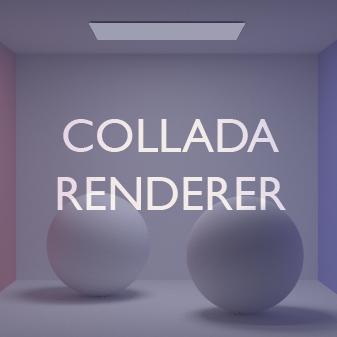
<style>
.page{position:relative;width:337px;height:337px}
.page>*{position:absolute;margin:0}
.t1{font:48px "GillSansMT";color:#f3ede4;text-transform:uppercase}
</style>
<div class="page">
<p class="t1" style="left:57px;top:119px;width:229px;height:91px;text-align:center">COLLADA<br>RENDERER</p>
</div>
